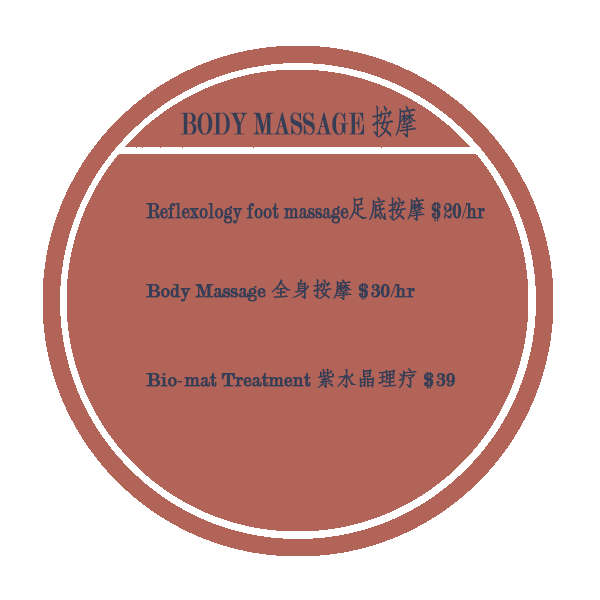
<style>
.page{position:relative;width:600px;height:600px;background:#b36458}
.page>*{position:absolute;margin:0}
.t1{font:33.1px "Modern-Regular";color:#353e55;font-weight:bold;scale:0.7 1}
.t2{font:33.1px "AdobeFangsongStd-Regular";color:#353e55;font-weight:bold;scale:0.7 1}
.t3{font:24.4px "Modern-Regular";color:#353e55;font-weight:bold;scale:0.78 1}
.t4{font:24.4px "AdobeFangsongStd-Regular";color:#353e55;font-weight:bold;scale:0.78 1}
.t5{font:20px "Modern-Regular";color:#353e55;font-weight:bold}
.t6{font:20px "AdobeFangsongStd-Regular";color:#353e55;font-weight:bold}
</style>
<div class="page">
<p class="t1" style="left:180px;top:105px;width:236px;height:33px">BODY MASSAGE <span class="t2">按摩</span></p>
<p class="t3" style="left:146px;top:197px;width:339px;height:27px">Reflexology foot massage<span class="t4">足底按摩</span> $20/hr</p>
<p class="t5" style="left:146px;top:279px;width:269px;height:23px">Body Massage <span class="t6">全身按摩</span> $30/hr</p>
<p class="t5" style="left:146px;top:368px;width:309px;height:21px">Bio-mat Treatment <span class="t6">紫水晶理疗</span> $39</p>
</div>
